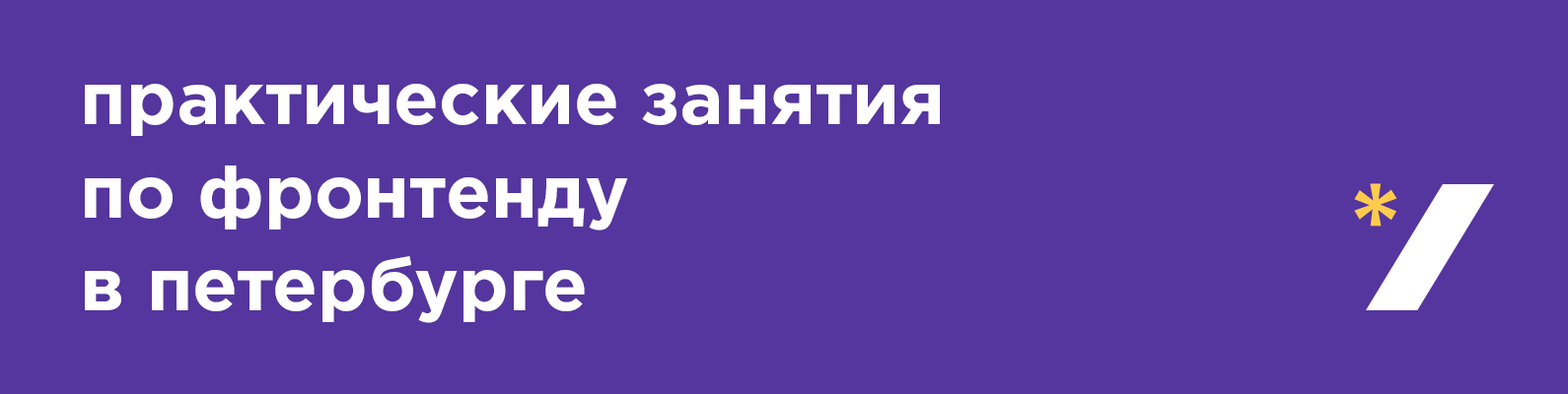
<style>
.page{position:relative;width:1568px;height:394px;background:#55359e}
.page>*{position:absolute;margin:0}
.t1{font:74px/93.2px "GothamPro-Bold";color:#ffffff}
</style>
<div class="page">
<p class="t1" style="left:85px;top:84px;width:855px;height:239px">практические занятия<br>по фронтенду<br>в петербурге</p>
</div>
